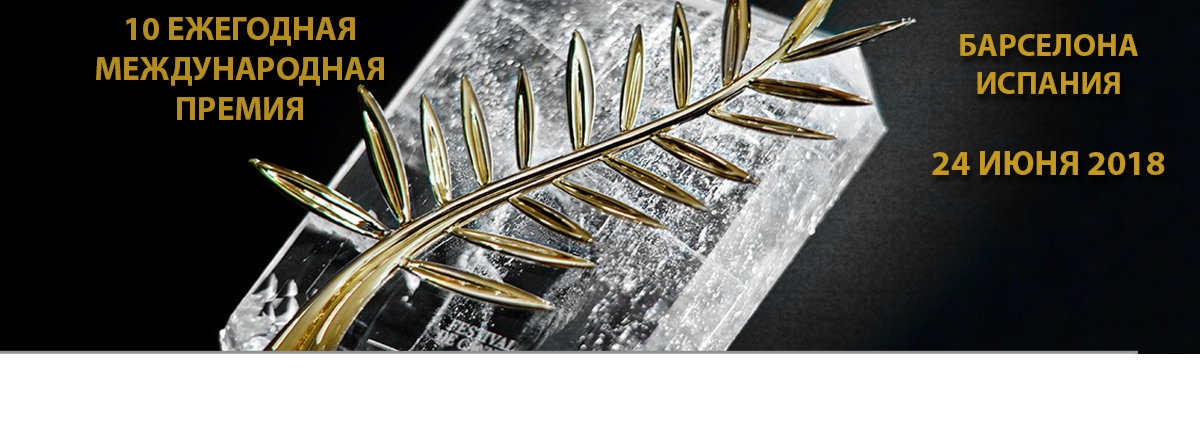
<style>
.page{position:relative;width:1200px;height:432px}
.page>*{position:absolute;margin:0}
.t1{font:33.2px "MyriadPro-Bold";color:#c59a1d}
.t2{font:31.8px "MyriadPro-Bold";color:#c59a1d}
.t3{font:35.4px "MyriadPro-Bold";color:#c59a1d}
</style>
<div class="page">
<p class="t1" style="left:96px;top:17px;width:288px;height:103px;text-align:center;opacity:0.89">10 ЕЖЕГОДНАЯ МЕЖДУНАРОДНАЯ ПРЕМИЯ</p>
<p class="t2" style="left:932px;top:34px;width:233px;height:141px;text-align:center">БАРСЕЛОНА<br>ИСПАНИЯ <br><br><span class="t3">24 ИЮНЯ 2018</span></p>
</div>
